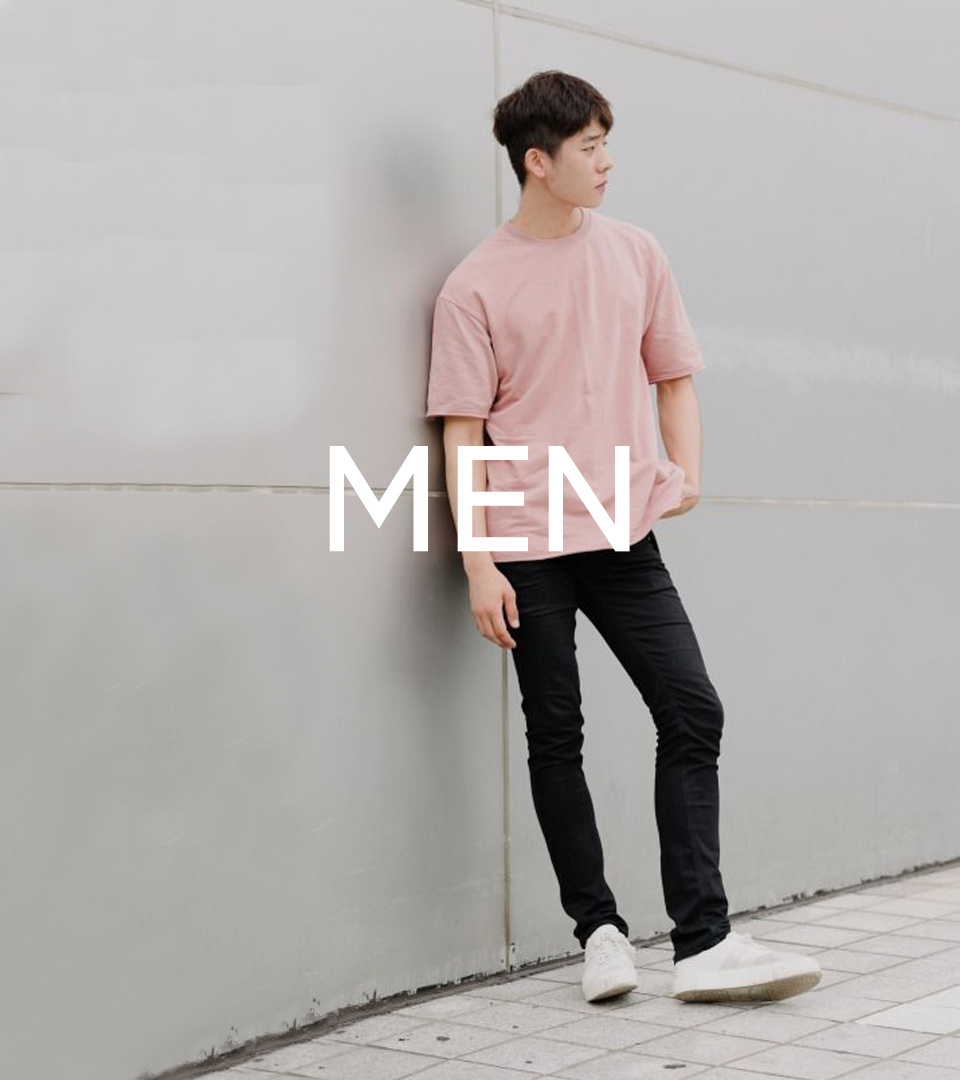
<style>
.page{position:relative;width:960px;height:1080px}
.page>*{position:absolute;margin:0}
.t1{font:150px "Young";color:#ffffff}
</style>
<div class="page">
<p class="t1" style="left:329px;top:446px;width:301px;height:106px">MEN</p>
</div>
